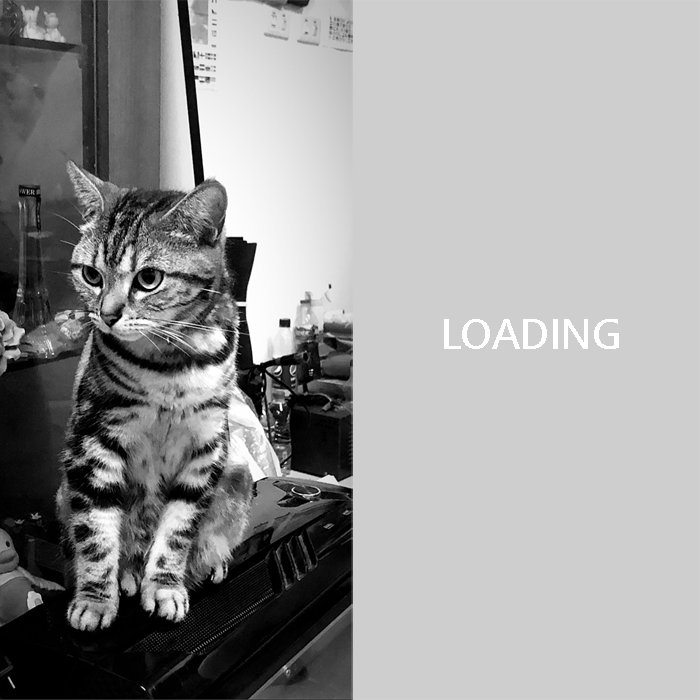
<style>
.page{position:relative;width:700px;height:700px;background:#cecece}
.page>*{position:absolute;margin:0}
.t1{font:39.3px "MicrosoftJhengHeiBold";letter-spacing:-0.015em;color:#ffffff}
</style>
<div class="page">
<p class="t1" style="left:444px;top:319px;width:175px;height:30px">LOADING</p>
</div>
